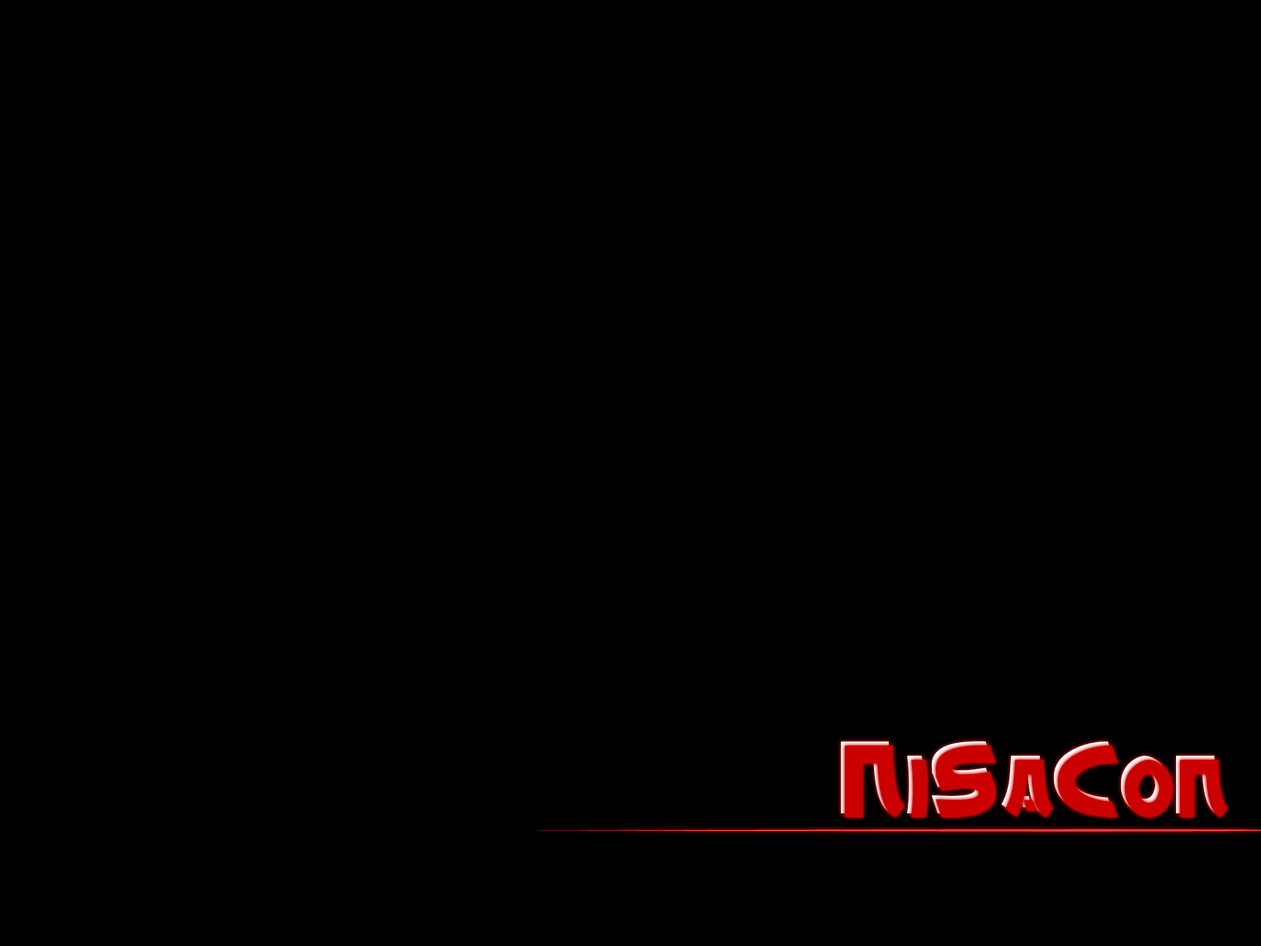
<style>
.page{position:relative;width:1261px;height:946px;background:#000000}
.page>*{position:absolute;margin:0}
.t1{font:96.8px "Chinyen";color:#cb0000}
</style>
<div class="page">
<p class="t1" style="left:841px;top:741px;width:383px;height:73px">NiSaCon</p>
<p class="t1" style="left:845px;top:745px;width:383px;height:73px">NiSaCon</p>
</div>
